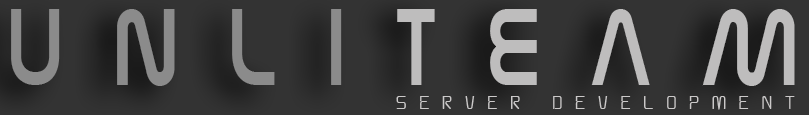
<style>
.page{position:relative;width:809px;height:115px;background:#333333}
.page>*{position:absolute;margin:0}
.t1{font:120.8px "NasalizationFree";letter-spacing:0.55em;color:#8b8b8b;scale:0.75 1}
.t2{font:120.8px "NasalizationFree";letter-spacing:0.55em;color:#bebdbd;scale:0.75 1}
.t3{font:23.2px "AunchantedXspace-Bold";letter-spacing:0.582em;color:#cbc9c9;scale:0.83 1}
</style>
<div class="page">
<p class="t1" style="left:11px;top:9px;width:784px;height:77px">UNLI<span class="t2">TEAM</span></p>
<p class="t3" style="left:396px;top:96px;width:399px;height:14px">SERVER DEVELOPMENT</p>
</div>
